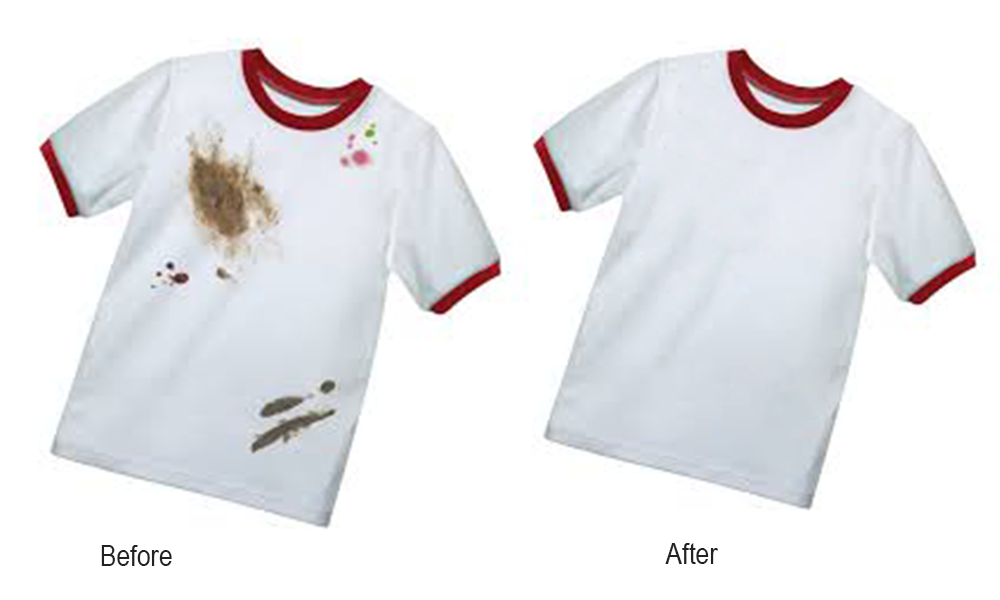
<style>
.page{position:relative;width:1000px;height:600px;background:#ffffff}
.page>*{position:absolute;margin:0}
.t1{font:30px "ArialNarrow";color:#232121}
</style>
<div class="page">
<p class="t1" style="left:101px;top:545px;width:71px;height:21px">Before</p>
<p class="t1" style="left:665px;top:543px;width:53px;height:21px">After</p>
</div>
